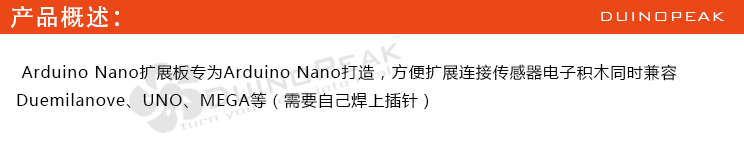
<style>
.page{position:relative;width:744px;height:156px;background:#ffffff}
.page>*{position:absolute;margin:0}
.t1{font:24px "AdobeHeitiStd-Regular";letter-spacing:0.05em;color:#ffffff}
.t2{font:18px "BankGothicBT-Light";letter-spacing:0.05em;color:#ffffff}
.t3{font:16px "MicrosoftYaHei";letter-spacing:0.05em;color:#000000}
</style>
<div class="page">
<p class="t1" style="left:10px;top:6px;width:109px;height:23px">产品概述：</p>
<p class="t2" style="left:601px;top:12px;width:124px;height:9px">DUINOPEAK</p>
<p class="t3" style="left:17px;top:64px;width:660px;height:45px">Arduino Nano扩展板专为Arduino Nano打造，方便扩展连接传感器电子积木同时兼容<br>Duemilanove、UNO、MEGA等（需要自己焊上插针）</p>
</div>
